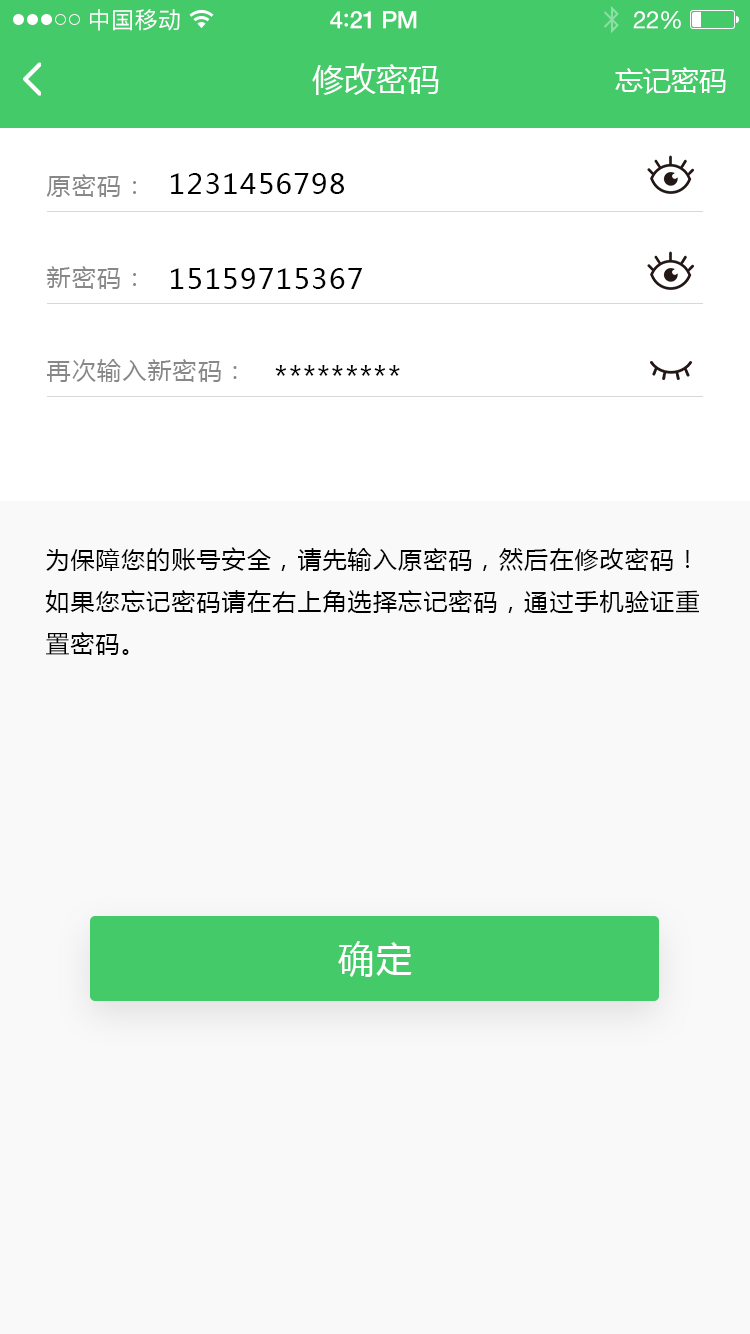
<style>
.page{position:relative;width:750px;height:1334px;background:#f9f9f9}
.page>*{position:absolute;margin:0}
.t1{font:23px "PingFangSC-Regular";letter-spacing:0.02em;color:#ffffff}
.t2{font:24px "HelveticaNeue-Medium";letter-spacing:-0.02em;color:#ffffff}
.t3{font:26px "Avenir-Medium";letter-spacing:-0.02em;color:#ffffff}
.t4{font:24px "HelveticaNeue";letter-spacing:-0.02em;color:#ffffff}
.t5{font:32px "MicrosoftYaHei";color:#ffffff;text-transform:uppercase}
.t6{font:28px "MicrosoftYaHei";color:#ffffff;text-transform:uppercase}
.t7{font:24px "MicrosoftYaHei";letter-spacing:0.05em;color:#888888;text-transform:uppercase}
.t8{font:28px "MicrosoftYaHei";letter-spacing:0.05em;color:#010101;text-transform:uppercase}
.t9{font:24px "MicrosoftYaHei";letter-spacing:0.05em;color:#000000;text-transform:uppercase}
.t10{font:36px "MicrosoftYaHei";letter-spacing:0.06em;color:#ffffff;text-transform:uppercase}
</style>
<div class="page">
<p class="t1" style="left:90px;top:9px;width:90px;height:22px">中国移动</p>
<p class="t2" style="left:330px;top:11px;width:87px;height:18px">4<span class="t3">:</span>21 PM</p>
<p class="t4" style="left:633px;top:11px;width:48px;height:18px">22%</p>
<p class="t5" style="left:312px;top:63px;width:127px;height:32px">修改密码</p>
<p class="t6" style="left:615px;top:67px;width:111px;height:27px">忘记密码</p>
<p class="t7" style="left:46px;top:174px;width:90px;height:23px">原密码：</p>
<p class="t8" style="left:171px;top:173px;width:173px;height:21px">1231456798</p>
<p class="t7" style="left:46px;top:266px;width:90px;height:23px">新密码：</p>
<p class="t8" style="left:171px;top:268px;width:191px;height:21px">15159715367</p>
<p class="t7" style="left:47px;top:359px;width:190px;height:23px">再次输入新密码：</p>
<p class="t8" style="left:275px;top:365px;width:125px;height:11px">*********</p>
<p class="t9" style="left:45px;top:547px;width:654px;height:108px">为保障您的账号安全，请先输入原密码，然后在修改密码！如果您忘记密码请在右上角选择忘记密码，通过手机验证重置密码。</p>
<p class="t10" style="left:338px;top:941px;width:74px;height:36px">确定</p>
</div>
